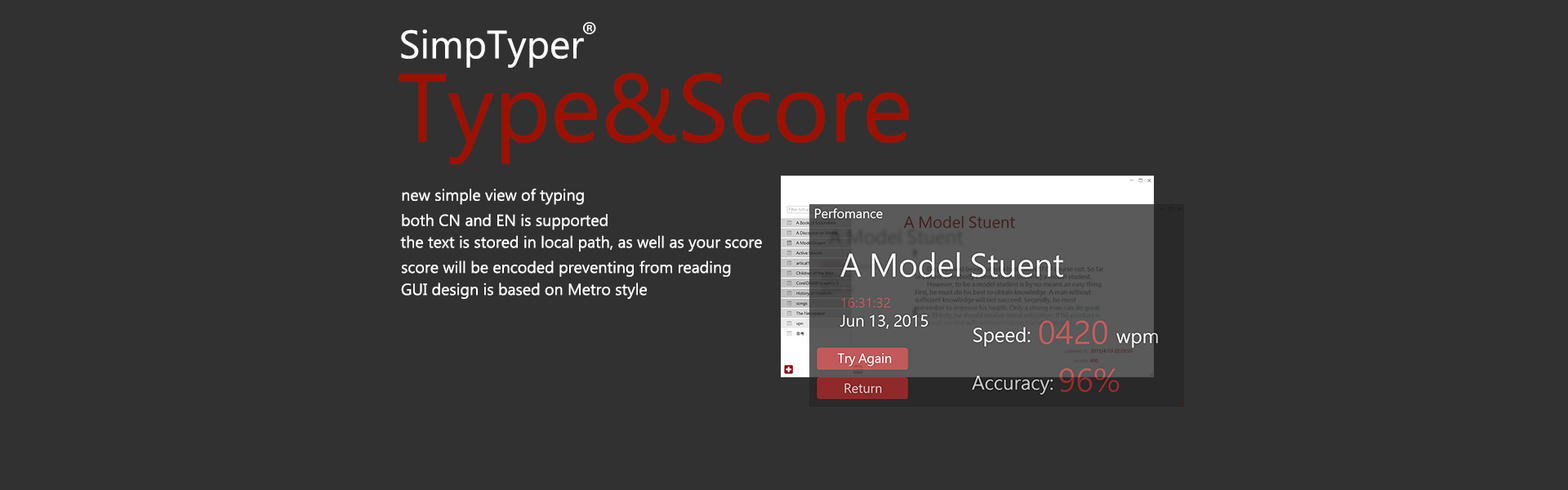
<style>
.page{position:relative;width:1568px;height:490px;background:#313131}
.page>*{position:absolute;margin:0}
.t1{font:39.5px "MicrosoftNewTaiLue";color:#ffffff}
.t2{font:96.2px "MicrosoftNewTaiLue";color:#9e1100}
.t3{font:16px "MicrosoftNewTaiLue";color:#ffffff}
</style>
<div class="page">
<p class="t1" style="left:401px;top:29px;width:183px;height:39px">SimpTyper</p>
<p class="t2" style="left:399px;top:73px;width:510px;height:92px">Type&amp;Score</p>
<p class="t3" style="left:402px;top:188px;width:182px;height:17px">new simple view of typing</p>
<p class="t3" style="left:402px;top:214px;width:206px;height:16px">both CN and EN is supported</p>
<p class="t3" style="left:400px;top:235px;width:362px;height:17px">the text is stored in local path, as well as your score</p>
<p class="t3" style="left:402px;top:261px;width:329px;height:16px">score will be encoded preventing from reading</p>
<p class="t3" style="left:401px;top:283px;width:246px;height:16px">GUI design is based on Metro style</p>
</div>
